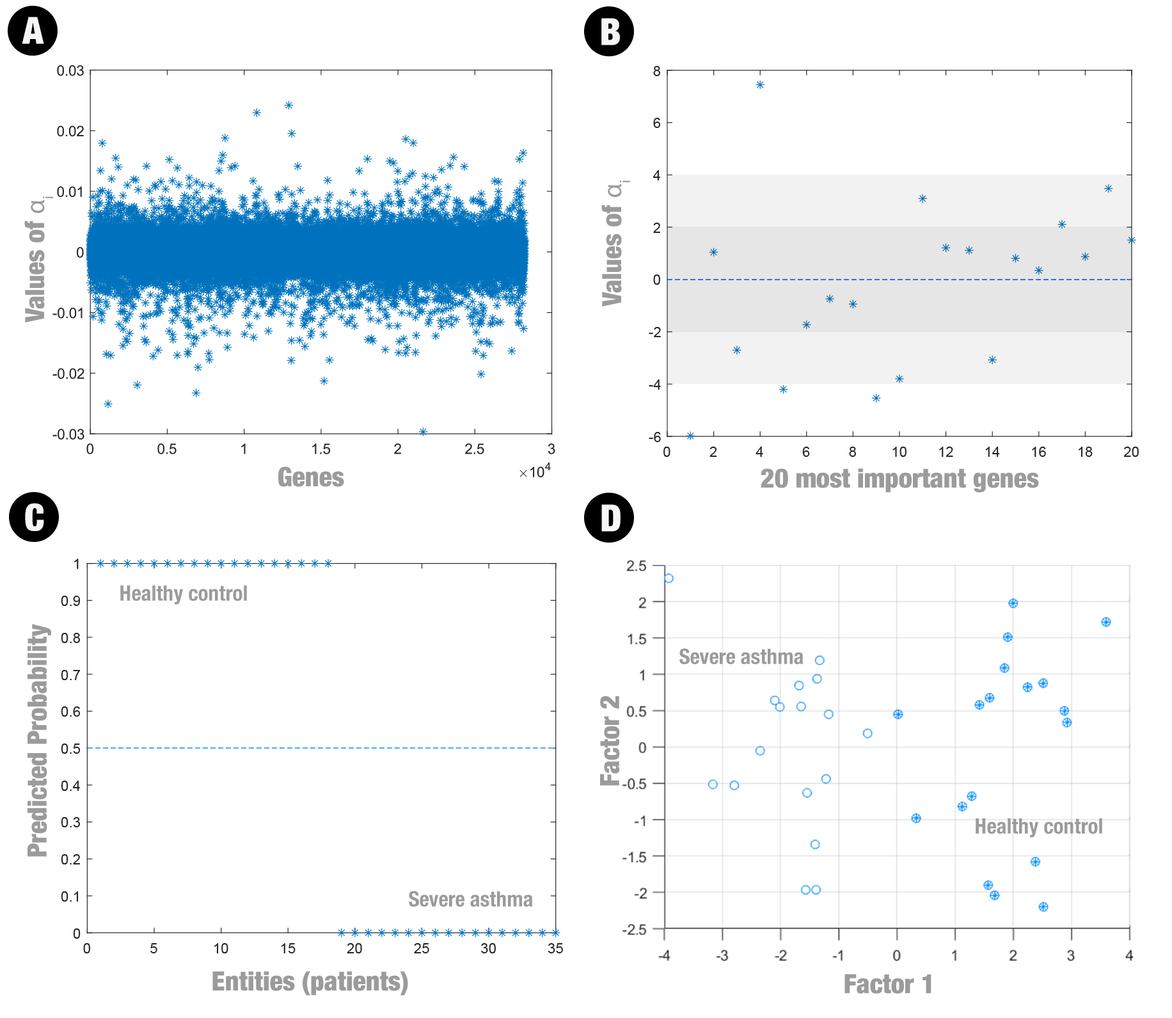
<style>
.page{position:relative;width:1172px;height:1018px;background:#ffffff}
.page>*{position:absolute;margin:0}
.t1{font:37.3px "HelveticaNeue-CondensedBlack";color:#f6f6f6}
.t2{font:26.7px "HelveticaNeue-CondensedBlack";color:#9b9b9b}
.t3{font:26.7px "MyriadPro-Regular";color:#9b9b9b}
.t4{font:21.3px "HelveticaNeue-CondensedBold";color:#9b9b9b}
</style>
<div class="page">
<p class="t1" style="left:22px;top:17px;width:22px;height:27px">A</p>
<p class="t1" style="left:601px;top:18px;width:19px;height:27px">B</p>
<p class="t2" style="left:601px;top:180px;width:29px;height:126px;rotate:-90deg">Values of <span class="t3">αi</span></p>
<p class="t2" style="left:24px;top:196px;width:29px;height:126px;rotate:-90deg">Values of <span class="t3">αi</span></p>
<p class="t2" style="left:278px;top:466px;width:66px;height:21px">Genes</p>
<p class="t2" style="left:761px;top:468px;width:278px;height:25px">20 most important genes</p>
<p class="t1" style="left:25px;top:503px;width:19px;height:28px">C</p>
<p class="t1" style="left:601px;top:504px;width:19px;height:28px">D</p>
<p class="t4" style="left:120px;top:585px;width:127px;height:19px">Healthy control</p>
<p class="t2" style="left:28px;top:624px;width:23px;height:232px;rotate:-90deg">Predicted Probability</p>
<p class="t4" style="left:679px;top:648px;width:124px;height:16px">Severe asthma</p>
<p class="t2" style="left:600px;top:696px;width:20px;height:89px;rotate:-90deg">Factor 2</p>
<p class="t4" style="left:975px;top:818px;width:127px;height:19px">Healthy control</p>
<p class="t4" style="left:409px;top:890px;width:124px;height:16px">Severe asthma</p>
<p class="t2" style="left:212px;top:971px;width:196px;height:24px">Entities (patients)</p>
<p class="t2" style="left:844px;top:973px;width:87px;height:20px">Factor 1</p>
</div>
